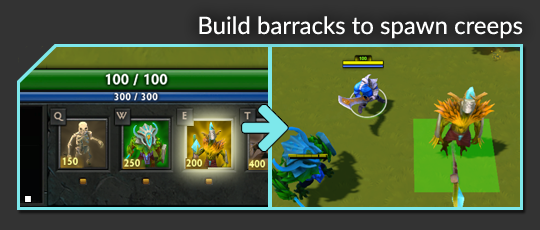
<style>
.page{position:relative;width:540px;height:230px}
.page>*{position:absolute;margin:0}
.t1{font:24px "Lato-Regular";color:#feffff}
</style>
<div class="page">
<p class="t1" style="left:199px;top:16px;width:324px;height:23px">Build barracks to spawn creeps</p>
</div>
